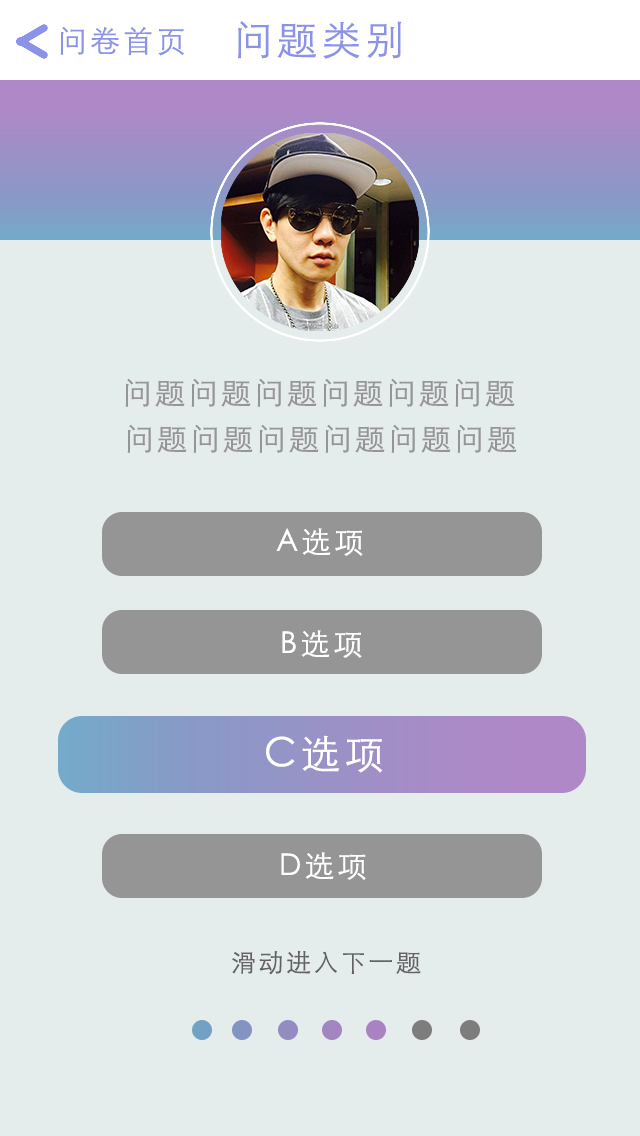
<style>
.page{position:relative;width:640px;height:1136px;background:#e4ecec}
.page>*{position:absolute;margin:0}
.t1{font:30px "STXihei";letter-spacing:0.1em;color:#8b93e8}
.t2{font:40px "STXihei";letter-spacing:0.1em;color:#8b93e8}
.t3{font:30px "STXihei";letter-spacing:0.1em;color:#959595}
.t4{font:30px "STXihei";letter-spacing:0.1em;color:#ffffff}
.t5{font:40px "STXihei";letter-spacing:0.1em;color:#ffffff}
.t6{font:25px "STXihei";letter-spacing:0.1em;color:#626262}
</style>
<div class="page">
<p class="t1" style="left:60px;top:26px;width:124px;height:30px">问卷首页</p>
<p class="t2" style="left:238px;top:21px;width:164px;height:38px">问题类别</p>
<p class="t3" style="left:125px;top:378px;width:390px;height:29px">问题问题问题问题问题问题</p>
<p class="t3" style="left:127px;top:424px;width:390px;height:29px">问题问题问题问题问题问题</p>
<p class="t4" style="left:276px;top:528px;width:87px;height:28px">A选项</p>
<p class="t4" style="left:282px;top:630px;width:80px;height:28px">B选项</p>
<p class="t5" style="left:266px;top:735px;width:117px;height:38px">C选项</p>
<p class="t4" style="left:281px;top:852px;width:85px;height:28px">D选项</p>
<p class="t6" style="left:232px;top:950px;width:189px;height:25px">滑动进入下一题</p>
</div>
